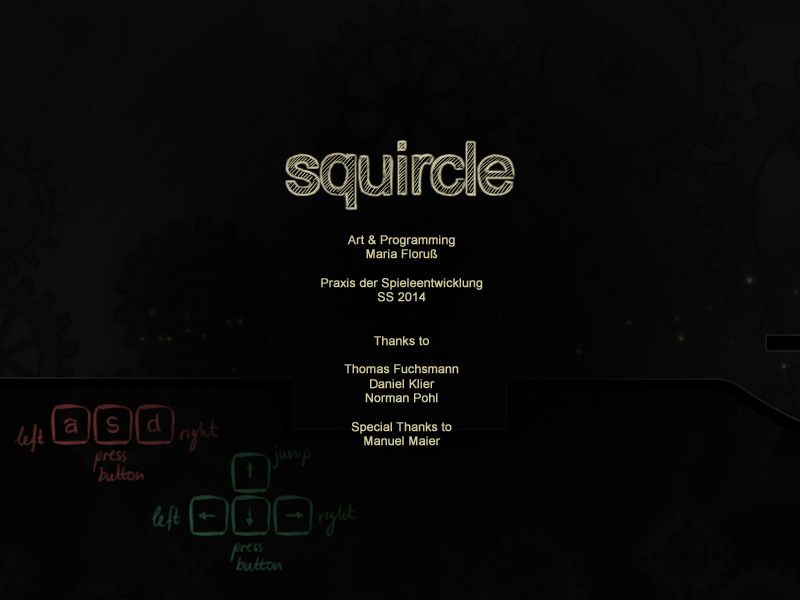
<style>
.page{position:relative;width:800px;height:600px}
.page>*{position:absolute;margin:0}
.t1{font:12px "ArialMT";color:#ccc692;font-weight:bold}
</style>
<div class="page">
<p class="t1" style="left:321px;top:235px;width:162px;height:211px;text-align:center">Art &amp; Programming<br>Maria Floruß<br><br>Praxis der Spieleentwicklung<br>SS 2014<br><br><br>Thanks to<br><br>Thomas Fuchsmann<br>Daniel Klier<br>Norman Pohl<br><br>Special Thanks to<br>Manuel Maier</p>
</div>
